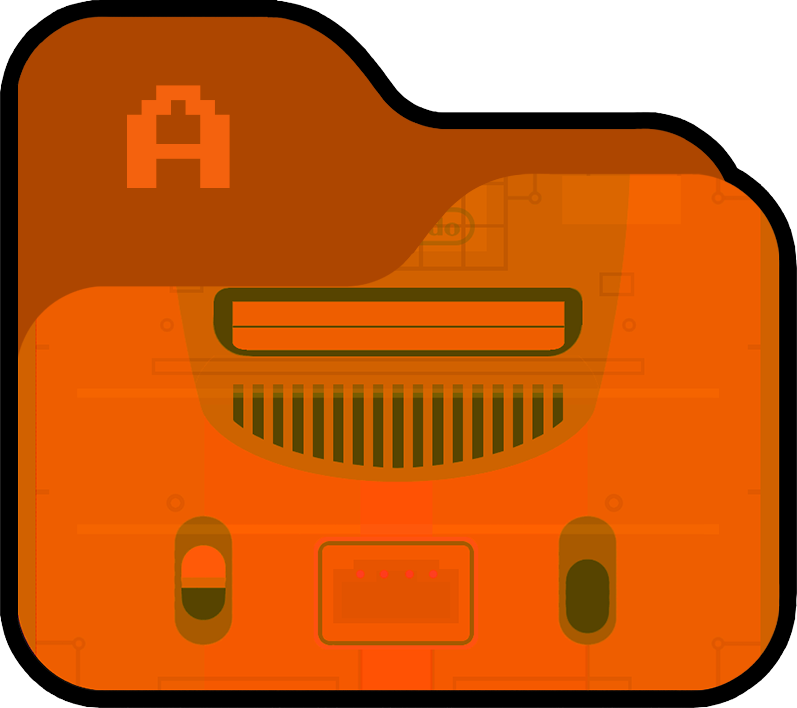
<style>
.page{position:relative;width:797px;height:708px;background:#ee5e00}
.page>*{position:absolute;margin:0}
.t1{font:150px "PixelEmulator";color:#f4620e}
</style>
<div class="page">
<p class="t1" style="left:127px;top:85px;width:103px;height:103px">A</p>
</div>
